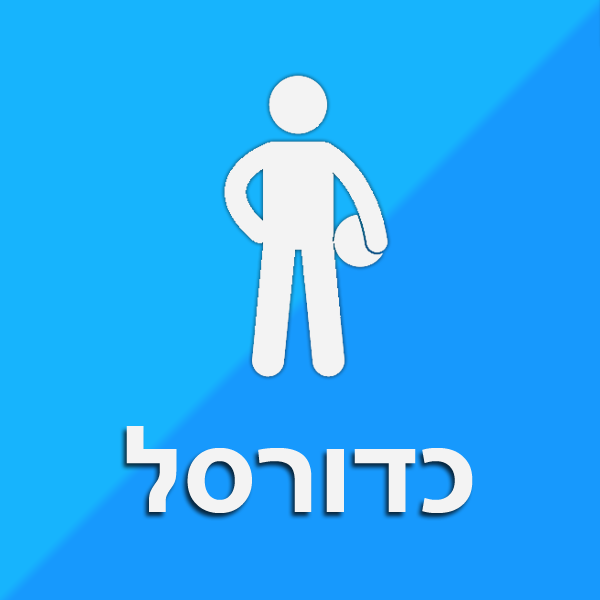
<style>
.page{position:relative;width:600px;height:600px;background:#17b4fd}
.page>*{position:absolute;margin:0}
.t1{font:120px "Arial-BoldMT";color:#f3f3f3}
</style>
<div class="page">
<p class="t1" style="left:126px;top:426px;width:347px;height:87px">לסרודכ</p>
</div>
